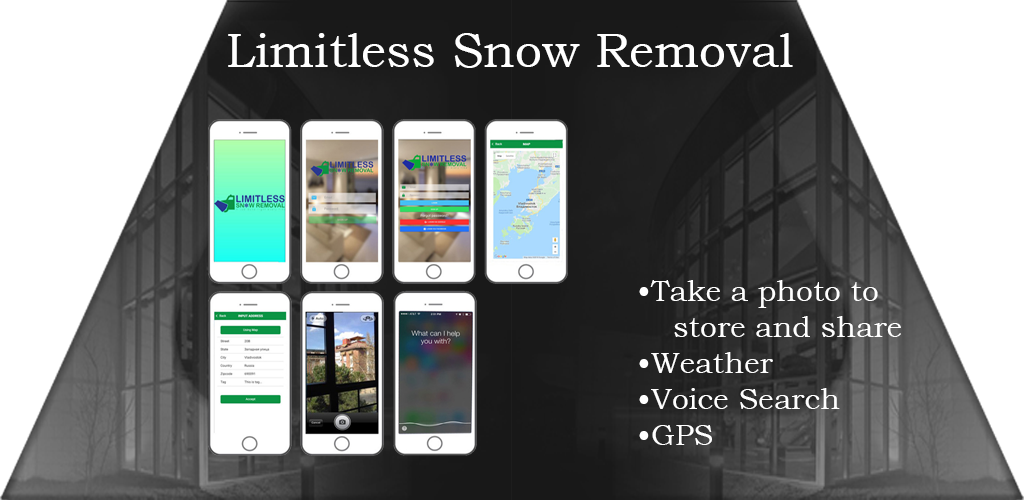
<style>
.page{position:relative;width:1024px;height:500px;background:#ffffff}
.page>*{position:absolute;margin:0}
.t1{font:48px "BookmanOldStyle";color:#ffffff}
.t2{font:30px "BookmanOldStyle";color:#ffffff}
</style>
<div class="page">
<p class="t1" style="left:228px;top:33px;width:565px;height:35px">Limitless Snow Removal</p>
<p class="t2" style="left:639px;top:280px;width:262px;height:165px">•Take a photo to<br> store and share<br>•Weather<br>•Voice Search<br>•GPS</p>
</div>
